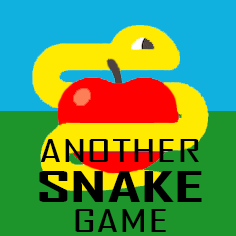
<style>
.page{position:relative;width:236px;height:236px;background:#10b1de}
.page>*{position:absolute;margin:0}
.t1{font:29.9px/30px "AgencyFB-Reg";color:#000000;scale:1.9 1}
.t2{font:40px/40px "AgencyFB-Bold";color:#000000;scale:1.9 1}
</style>
<div class="page">
<p class="t1" style="left:39px;top:139px;width:163px;height:93px;text-align:center">ANOTHER<br><span class="t2">SNAKE<br></span>GAME</p>
</div>
